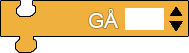
<style>
.page{position:relative;width:189px;height:53px;background:#f0b03d}
.page>*{position:absolute;margin:0}
.t1{font:21.1px "ArialMT";color:#ffffff}
</style>
<div class="page">
<p class="t1" style="left:89px;top:9px;width:30px;height:19px">GÅ</p>
</div>
